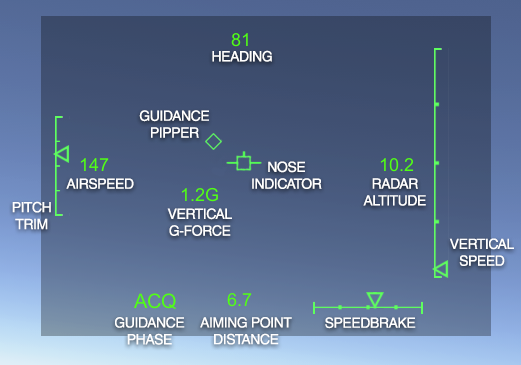
<style>
.page{position:relative;width:521px;height:365px}
.page>*{position:absolute;margin:0}
.t1{font:14px "HelveticaLTStd-Roman";letter-spacing:-0.03em;color:#ffffff}
</style>
<div class="page">
<p class="t1" style="left:212px;top:50px;width:60px;height:12px">HEADING</p>
<p class="t1" style="left:139px;top:110px;width:70px;height:28px;text-align:center">GUIDANCE<br>PIPPER</p>
<p class="t1" style="left:252px;top:161px;width:70px;height:28px;text-align:center">NOSE<br>INDICATOR</p>
<p class="t1" style="left:66px;top:178px;width:68px;height:11px">AIRSPEED</p>
<p class="t1" style="left:363px;top:178px;width:63px;height:28px;text-align:center">RADAR<br>ALTITUDE</p>
<p class="t1" style="left:12px;top:201px;width:39px;height:29px;text-align:center">PITCH<br>TRIM</p>
<p class="t1" style="left:167px;top:208px;width:65px;height:28px;text-align:center">VERTICAL<br>G-FORCE</p>
<p class="t1" style="left:449px;top:238px;width:65px;height:28px;text-align:center">VERTICAL<br>SPEED</p>
<p class="t1" style="left:115px;top:317px;width:70px;height:28px;text-align:center">GUIDANCE<br>PHASE</p>
<p class="t1" style="left:200px;top:317px;width:92px;height:28px;text-align:center">AIMING POINT<br>DISTANCE</p>
<p class="t1" style="left:325px;top:317px;width:91px;height:12px">SPEEDBRAKE</p>
</div>
